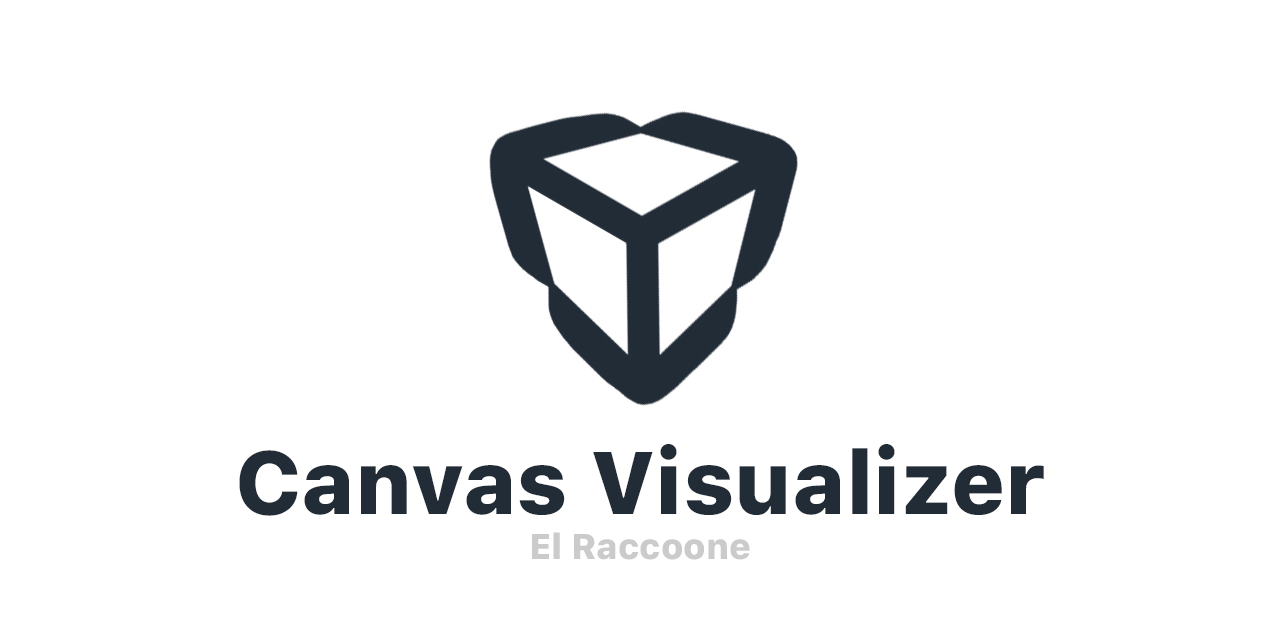
<style>
.page{position:relative;width:1280px;height:640px;background:#ffffff}
.page>*{position:absolute;margin:0}
.t1{font:88px "SFProText-Heavy";color:#222c36}
</style>
<div class="page">
<p class="t1" style="left:239px;top:444px;width:805px;height:72px">Canvas Visualizer</p>
</div>
